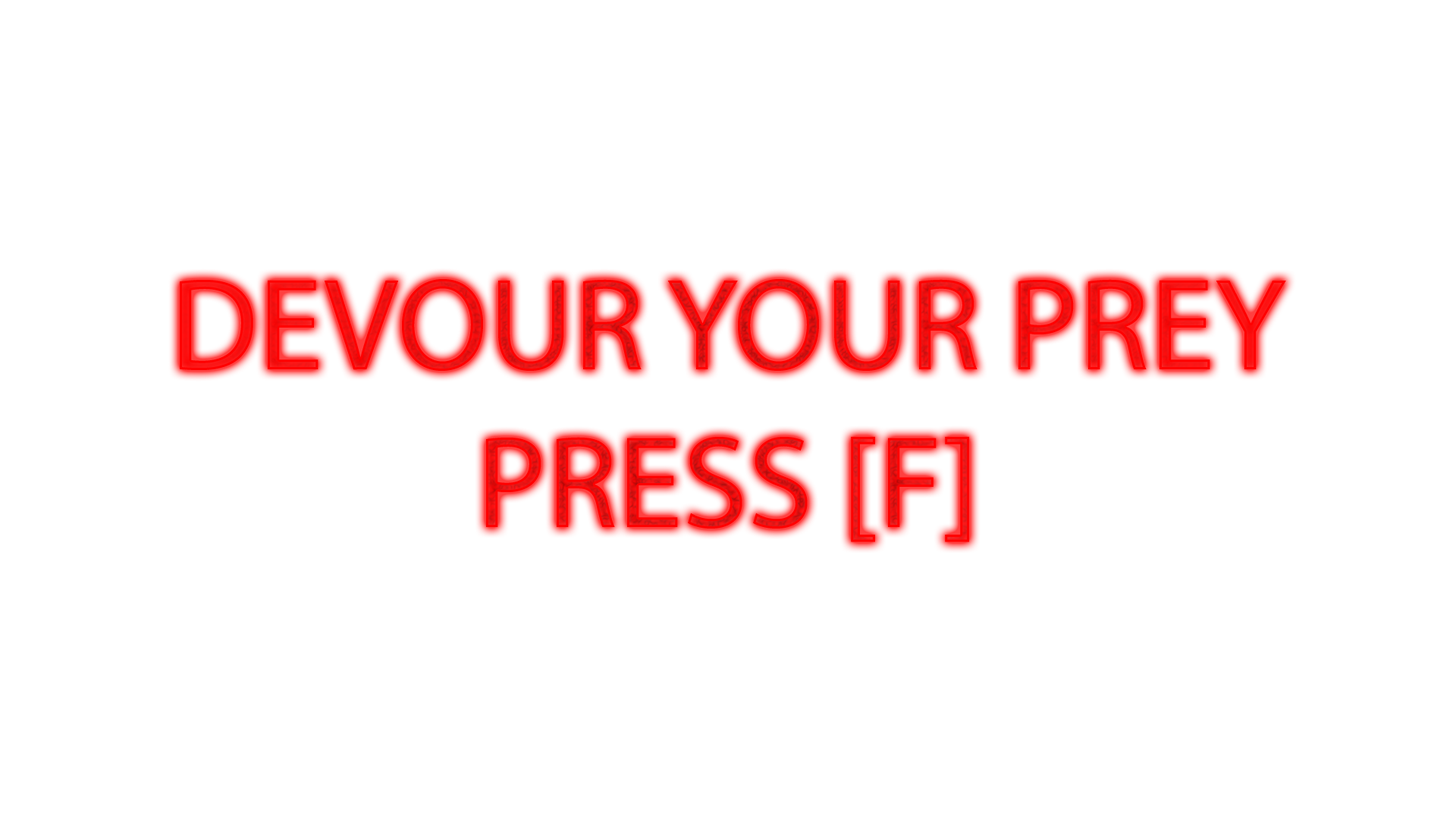
<style>
.page{position:relative;width:1456px;height:819px;background:#ffffff}
.page>*{position:absolute;margin:0}
.t1{font:132px "MyriadPro-Regular";color:#fe0000}
</style>
<div class="page">
<p class="t1" style="left:180px;top:279px;width:1106px;height:263px;text-align:center">DEVOUR YOUR PREY<br>PRESS [F]</p>
</div>
